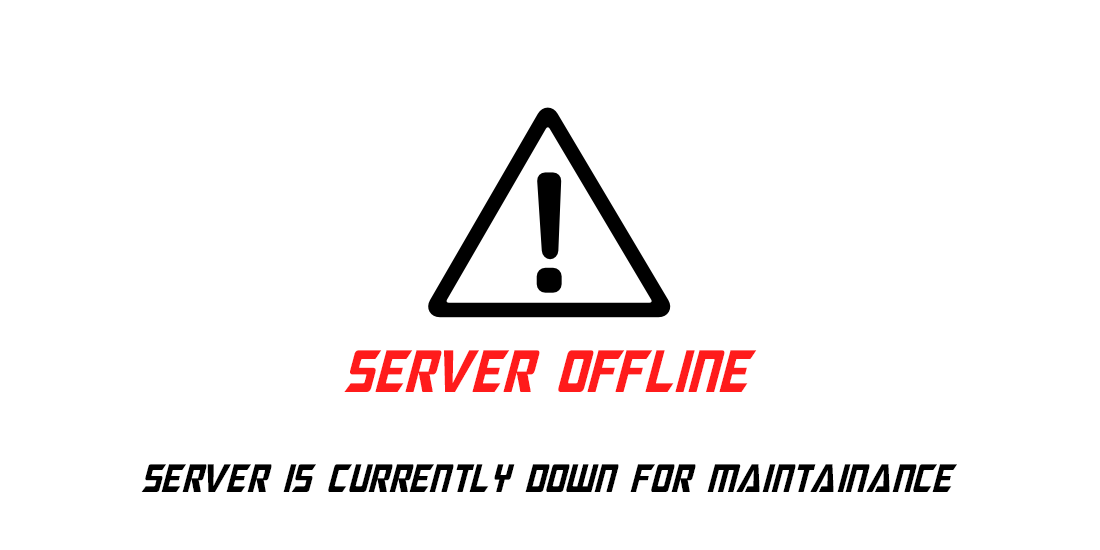
<style>
.page{position:relative;width:1100px;height:550px;background:#ffffff}
.page>*{position:absolute;margin:0}
.t1{font:60px "MegatronCondensed-Italic";color:#ff1b1b}
.t2{font:40px "MegatronCondensed-Italic";color:#000000}
</style>
<div class="page">
<p class="t1" style="left:344px;top:350px;width:413px;height:42px">server offline</p>
<p class="t2" style="left:141px;top:464px;width:816px;height:28px">SErver is currently down for maintainance</p>
</div>
